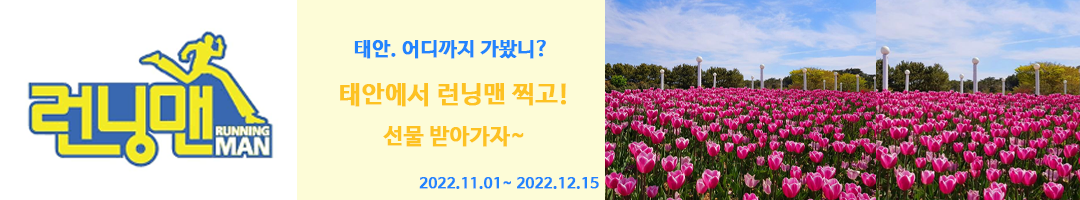
<style>
.page{position:relative;width:1080px;height:200px;background:#fdfcd7}
.page>*{position:absolute;margin:0}
.t1{font:20px "NanumBarunGothicBold";color:#2284fd;font-weight:bold}
.t2{font:25px "NanumBarunGothicBold";color:#fdc222;font-weight:bold}
.t3{font:22px "NanumBarunGothicBold";color:#fdc222;font-weight:bold}
.t4{font:15px "NanumBarunGothicBold";color:#2284fd;font-weight:bold}
</style>
<div class="page">
<p class="t1" style="left:354px;top:40px;width:192px;height:19px">태안. 어디까지 가봤니?</p>
<p class="t2" style="left:340px;top:83px;width:226px;height:64px;text-align:center">태안에서 런닝맨 찍고!<br><span class="t3">선물 받아가자~</span></p>
<p class="t4" style="left:419px;top:177px;width:180px;height:12px">2022.11.01~ 2022.12.15</p>
</div>
